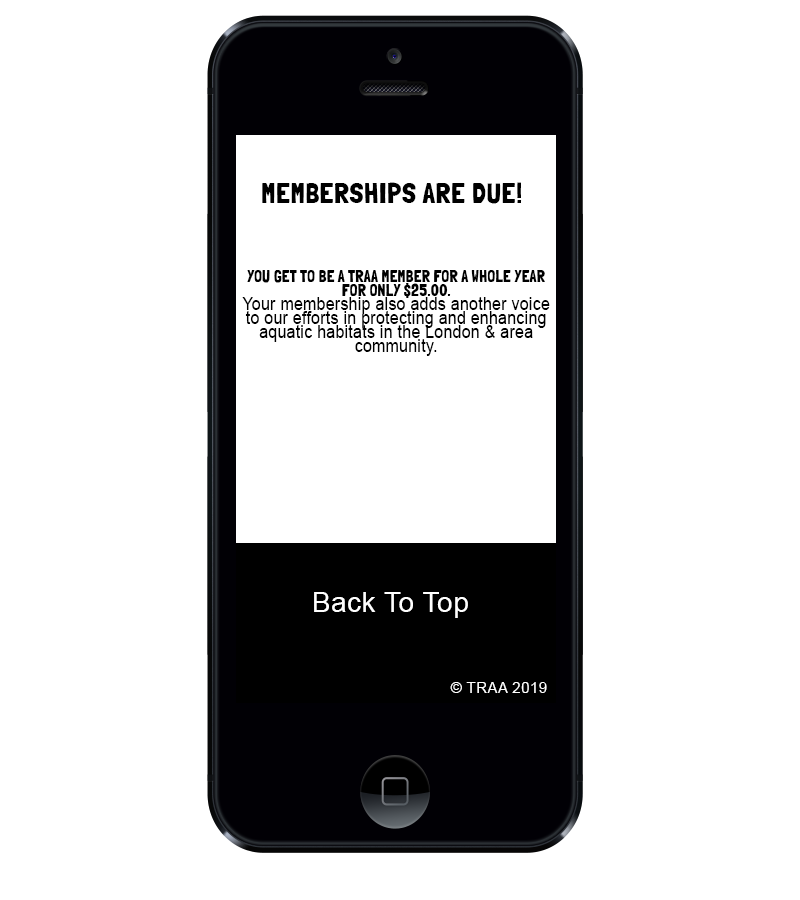
<style>
.page{position:relative;width:800px;height:900px;background:#ffffff}
.page>*{position:absolute;margin:0}
.t1{font:28.7px "LondrinaSolid-Regular";letter-spacing:0.02em;color:#000000}
.t2{font:18px/13.9px "ArialMT";letter-spacing:0.02em;color:#000000;scale:0.88 1}
.t3{font:18px/13.9px "LondrinaSolid-Regular";letter-spacing:0.02em;color:#000000;scale:0.88 1}
.t4{font:28px "ArialMT";letter-spacing:0.02em;color:#ffffff}
.t5{font:15.2px "ArialMT";letter-spacing:0.02em;color:#ffffff}
</style>
<div class="page">
<p class="t1" style="left:262px;top:182px;width:260px;height:22px">MEMBERSHIPS ARE DUE!</p>
<p class="t2" style="left:242px;top:270px;width:308px;height:86px;text-align:center"><span class="t3">YOU GET TO BE A TRAA MEMBER FOR A WHOLE YEAR FOR ONLY $25.00.</span> <br>Your membership also adds another voice to our efforts in protecting and enhancing aquatic habitats in the London &amp; area community.</p>
<p class="t4" style="left:314px;top:592px;width:154px;height:26px">Back To Top</p>
<p class="t5" style="left:450px;top:682px;width:97px;height:11px">© TRAA 2019</p>
</div>
